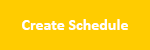
<style>
.page{position:relative;width:150px;height:50px;background:#ffcc00}
.page>*{position:absolute;margin:0}
.t1{font:16px "Calibri-Bold";color:#ffffff}
</style>
<div class="page">
<p class="t1" style="left:22px;top:19px;width:106px;height:11px">Create Schedule</p>
</div>
